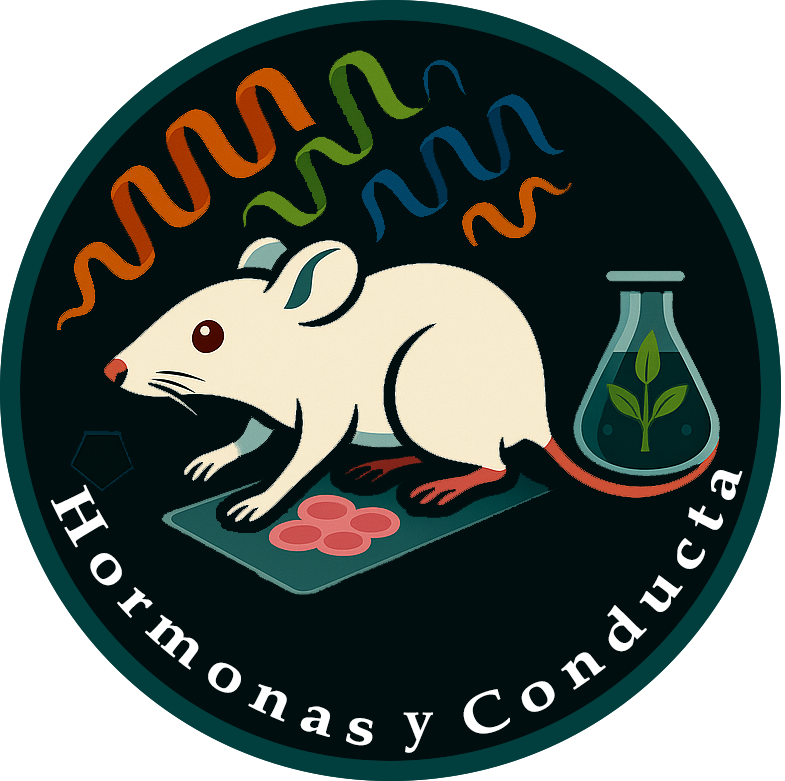
<style>
.page{position:relative;width:785px;height:781px;background:#000e0f}
.page>*{position:absolute;margin:0}
.t1{font:55px "PalatinoLinotype-Bold";letter-spacing:0.2em;color:#ffffff}
</style>
<div class="page">
<p class="t1" style="left:463px;top:470px;width:280px;height:264px;rotate:-44deg">Conducta</p>
<p class="t1" style="left:50px;top:484px;width:323px;height:262px;rotate:37deg">Hormonas</p>
<p class="t1" style="left:403px;top:712px;width:30px;height:41px">y</p>
</div>
